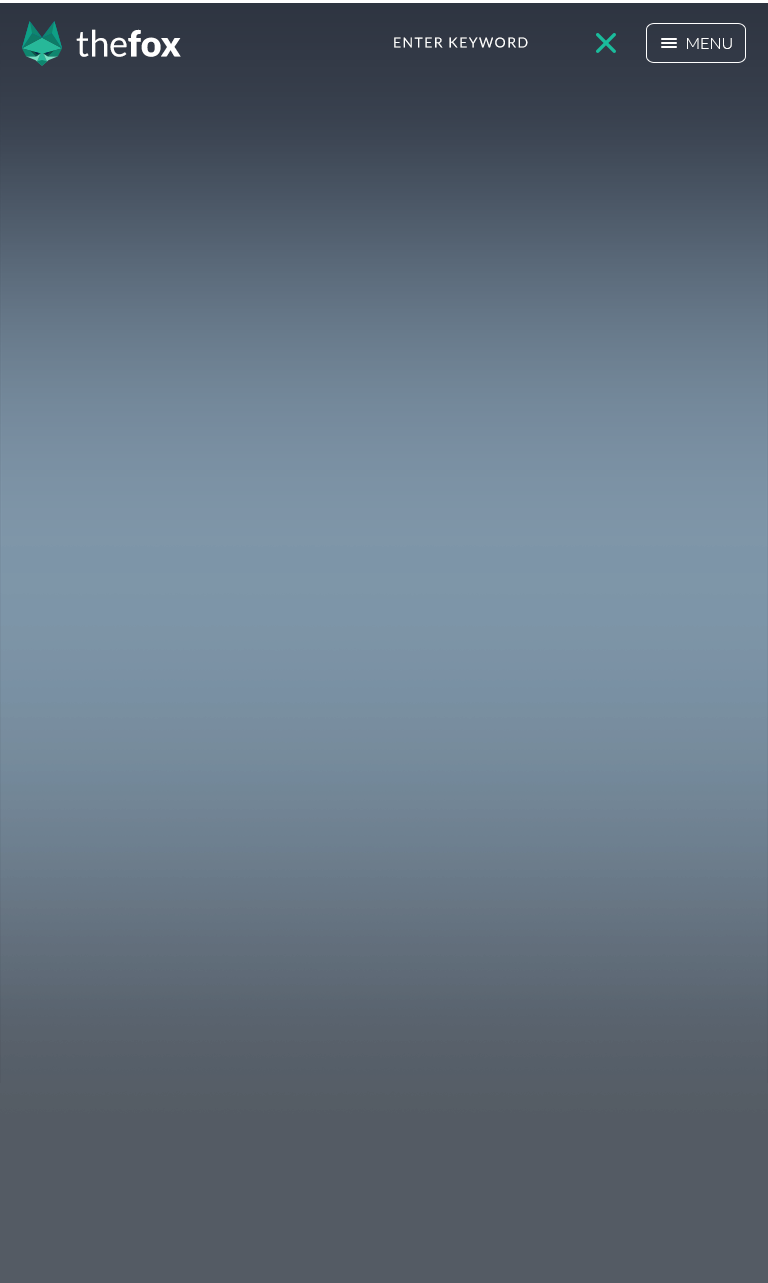
<style>
.page{position:relative;width:768px;height:1283px}
.page>*{position:absolute;margin:0}
.t1{font:36px "Lato-Regular";color:#ffffff}
.t2{font:36px "Lato-Black";color:#ffffff}
.t3{font:14px "Lato-Regular";letter-spacing:0.1em;color:#ffffff;text-transform:uppercase}
.t4{font:16px "Lato-Light";color:#ffffff;text-transform:uppercase}
</style>
<div class="page">
<p class="t1" style="left:76px;top:29px;width:105px;height:28px">the<span class="t2">fox</span></p>
<p class="t3" style="left:394px;top:37px;width:134px;height:11px">enter keyword</p>
<p class="t4" style="left:687px;top:38px;width:45px;height:11px">MENU</p>
</div>
